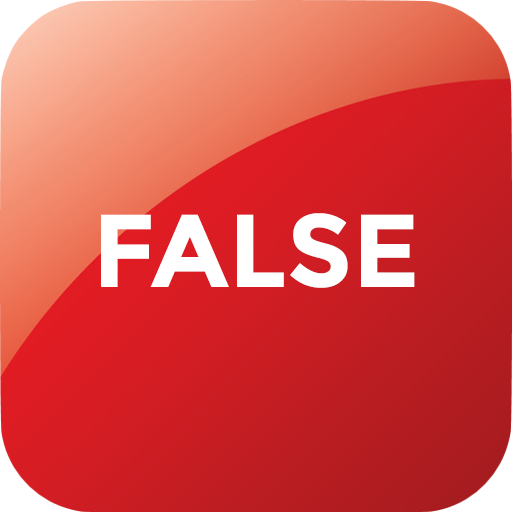
<style>
.page{position:relative;width:512px;height:512px}
.page>*{position:absolute;margin:0}
.t1{font:102.9px "Montserrat-Bold";color:#ffffff}
</style>
<div class="page">
<p class="t1" style="left:101px;top:213px;width:314px;height:75px">FALSE</p>
</div>
